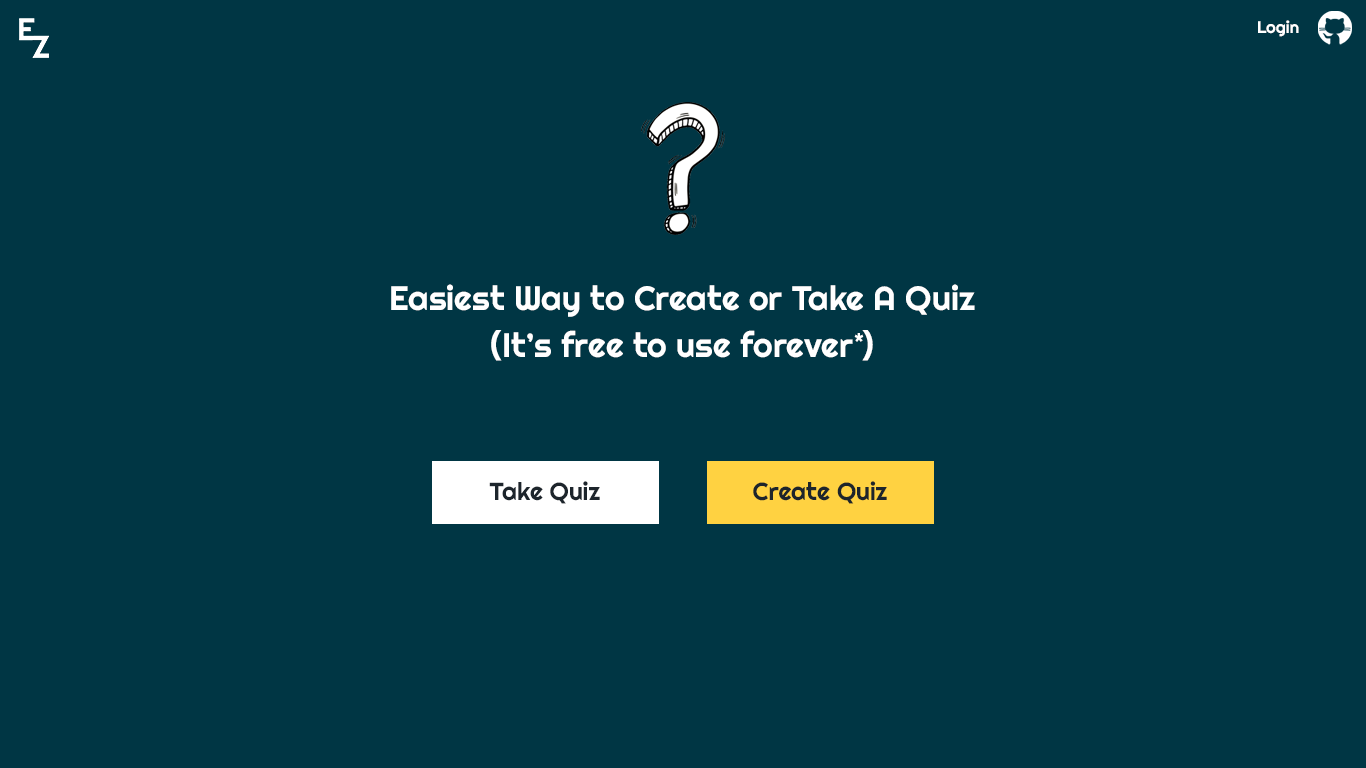
<style>
.page{position:relative;width:1366px;height:768px;background:#003644}
.page>*{position:absolute;margin:0}
.t1{font:16.7px "Righteous-Regular";color:#ffffff}
.t2{font:33.7px/47px "Righteous-Regular";color:#ffffff}
.t3{font:24.7px "Righteous-Regular";color:#1d252c}
</style>
<div class="page">
<p class="t1" style="left:1258px;top:20px;width:41px;height:17px">Login</p>
<p class="t2" style="left:391px;top:284px;width:584px;height:77px;text-align:center">Easiest Way to Create or Take A Quiz<br>(It’s free to use forever )</p>
<p class="t1" style="left:854px;top:333px;width:10px;height:9px">*</p>
<p class="t3" style="left:489px;top:481px;width:111px;height:23px">Take Quiz</p>
<p class="t3" style="left:753px;top:481px;width:134px;height:23px">Create Quiz</p>
</div>
